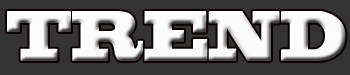
<style>
.page{position:relative;width:350px;height:75px;background:#333333}
.page>*{position:absolute;margin:0}
.t1{font:66.6px "BlackoakStd";color:#fcfbfb;scale:0.54 1}
</style>
<div class="page">
<p class="t1" style="left:7px;top:11px;width:339px;height:50px">TREND</p>
</div>
